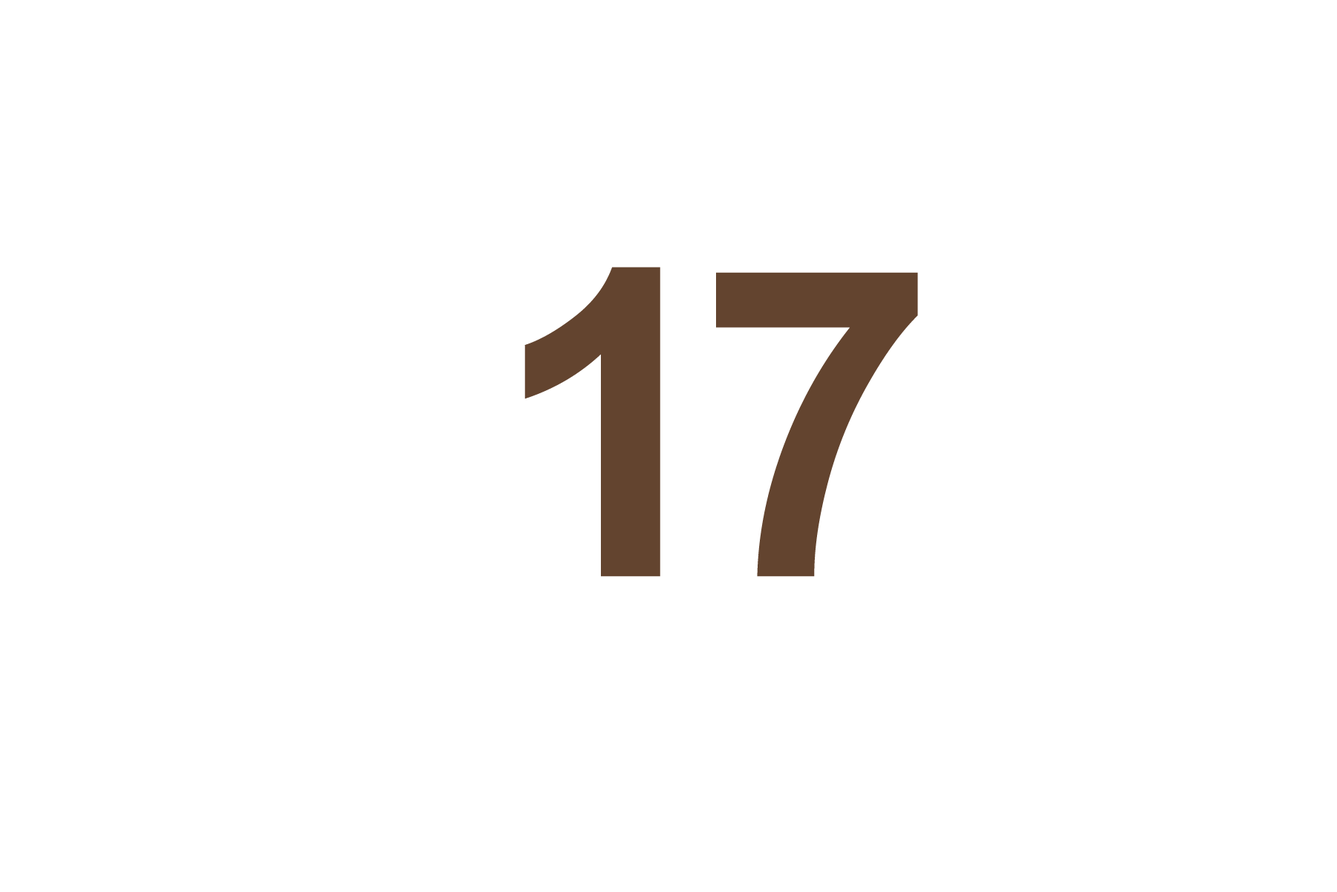
<style>
.page{position:relative;width:1337px;height:892px;background:#ffffff}
.page>*{position:absolute;margin:0}
.t1{font:429.6px "Arial-BoldMT";color:#63442f}
</style>
<div class="page">
<p class="t1" style="left:525px;top:267px;width:393px;height:310px">17</p>
</div>
